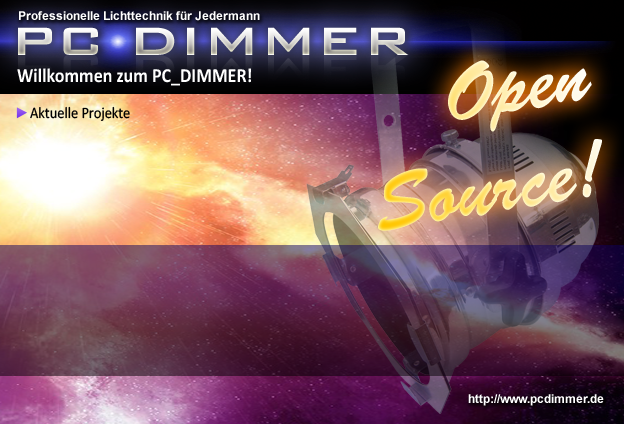
<style>
.page{position:relative;width:624px;height:424px}
.page>*{position:absolute;margin:0}
.t1{font:12px "Arial-BoldMT";color:#ffffff}
.t2{font:52.8px "BankGothicBT-Medium";scale:1.16 1}
.t3{font:80.4px "BrushScriptStd";scale:0.94 1}
.t4{font:20px "Calibri-Bold";color:#ffffff;scale:0.9 1}
.t5{font:16px "Calibri";color:#000000;scale:0.9 1}
</style>
<div class="page">
<p class="t1" style="left:19px;top:11px;width:241px;height:10px">Professionelle Lichttechnik für Jedermann</p>
<p class="t2" style="left:18px;top:27px;width:391px;height:28px">PC DIMMER</p>
<p class="t3" style="left:378px;top:60px;width:224px;height:171px;text-align:right;rotate:-9deg">Open<br>Source!</p>
<p class="t4" style="left:17px;top:68px;width:234px;height:18px">Willkommen zum PC_DIMMER!</p>
<p class="t5" style="left:30px;top:106px;width:100px;height:15px">Aktuelle Projekte</p>
<p class="t1" style="left:468px;top:394px;width:136px;height:12px">http://www.pcdimmer.de</p>
</div>
